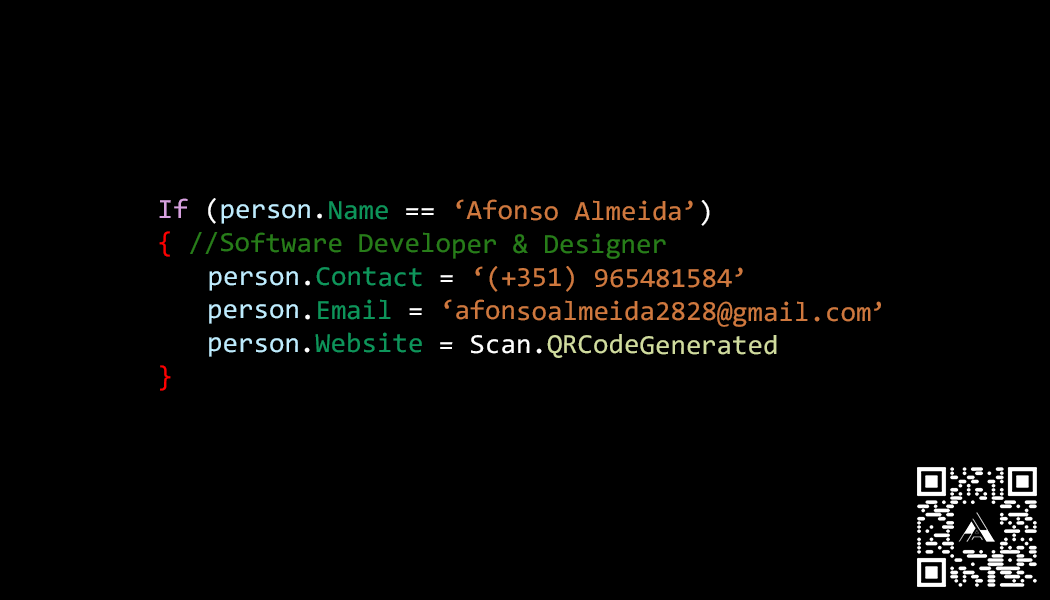
<style>
.page{position:relative;width:1050px;height:600px;background:#000000}
.page>*{position:absolute;margin:0}
.t1{font:27.8px "Consolas";color:#277d19}
.t2{font:27.8px "Consolas";color:#d7a0df}
.t3{font:27.8px "Consolas";color:#ffffff}
.t4{font:27.8px "Consolas";color:#beecfe}
.t5{font:27.8px "Consolas";color:#0d955a}
.t6{font:27.8px "Consolas";color:#cf783e}
.t7{font:27.8px "Consolas";color:#ff0000}
.t8{font:27.8px "Consolas";color:#0e965b}
.t9{font:27.8px "Consolas";color:#d0dc9e}
</style>
<div class="page">
<p class="t1" style="left:159px;top:198px;width:722px;height:193px"><span class="t2">If</span><span class="t3"> (</span><span class="t4">person</span><span class="t3">.</span><span class="t5">Name </span><span class="t3">== </span><span class="t6">‘Afonso Almeida’</span><span class="t3">) <br></span><span class="t7">{ </span>//Software Developer &amp; Designer<br> <span class="t4">person</span><span class="t3">.</span><span class="t8">Contact </span><span class="t3">= </span><span class="t6">‘(+351) 965481584’<br> </span><span class="t4">person</span><span class="t3">.</span><span class="t5">Email </span><span class="t3">= </span><span class="t6">‘afonsoalmeida2828@gmail.com’<br> </span><span class="t4">person</span><span class="t3">.</span><span class="t5">Website </span><span class="t3">= Scan.</span><span class="t9">QRCodeGenerated<br></span><span class="t7">}</span></p>
</div>
